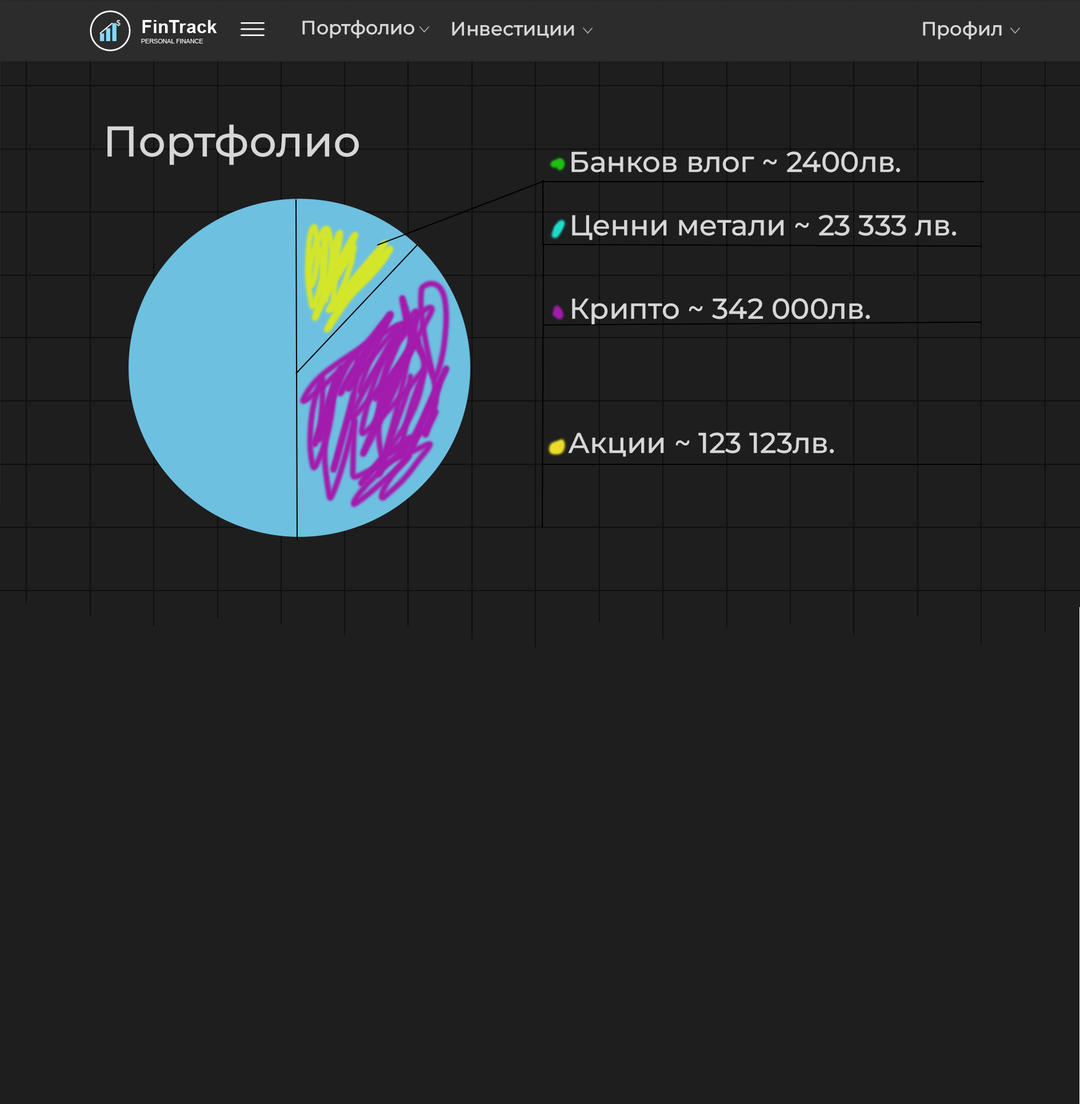
<style>
.page{position:relative;width:1080px;height:1104px;background:#1e1e1e}
.page>*{position:absolute;margin:0}
.t1{font:19px "MontserratRoman-Medium";color:#d7d7d7}
.t2{font:42.8px "MontserratRoman-Medium";color:#d7d7d7}
.t3{font:28.6px "MontserratRoman-Medium";color:#d7d7d7}
</style>
<div class="page">
<p class="t1" style="left:302px;top:20px;width:112px;height:18px">Портфолио</p>
<p class="t1" style="left:452px;top:22px;width:122px;height:16px">Инвестиции</p>
<p class="t1" style="left:923px;top:21px;width:79px;height:18px">Профил</p>
<p class="t2" style="left:107px;top:125px;width:252px;height:40px">Портфолио</p>
<p class="t3" style="left:571px;top:151px;width:329px;height:22px">Банков влог ~ 2400лв.</p>
<p class="t3" style="left:572px;top:215px;width:384px;height:26px">Ценни метали ~ 23 333 лв.</p>
<p class="t3" style="left:572px;top:298px;width:298px;height:27px">Крипто ~ 342 000лв.</p>
<p class="t3" style="left:568px;top:432px;width:266px;height:25px">Акции ~ 123 123лв.</p>
</div>
